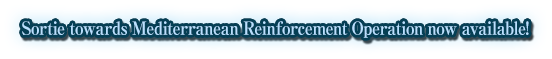
<style>
.page{position:relative;width:552px;height:59px;background:#ffffff}
.page>*{position:absolute;margin:0}
.t1{font:18px "RyuminPro-ExBold";letter-spacing:-0.04em;color:#b9e0ff;scale:0.9 1}
</style>
<div class="page">
<p class="t1" style="left:22px;top:21px;width:507px;height:17px">Sortie towards Mediterranean Reinforcement Operation now available!</p>
</div>
